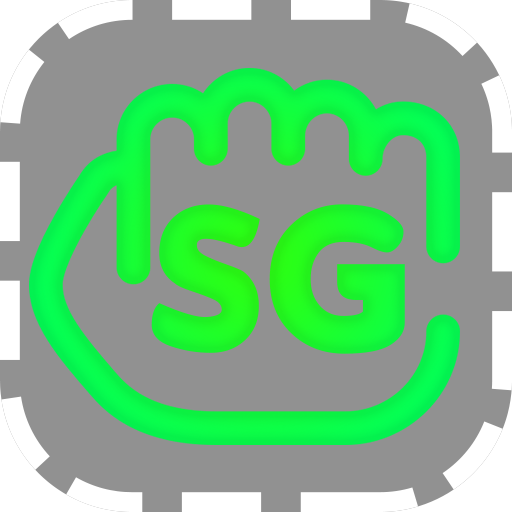
<style>
.page{position:relative;width:512px;height:512px;background:#919191}
.page>*{position:absolute;margin:0}
.t1{font:218.4px "Insaniburger-with-Cheese";letter-spacing:0.015em;color:#1ff926}
</style>
<div class="page">
<p class="t1" style="left:151px;top:204px;width:254px;height:150px">SG</p>
</div>
